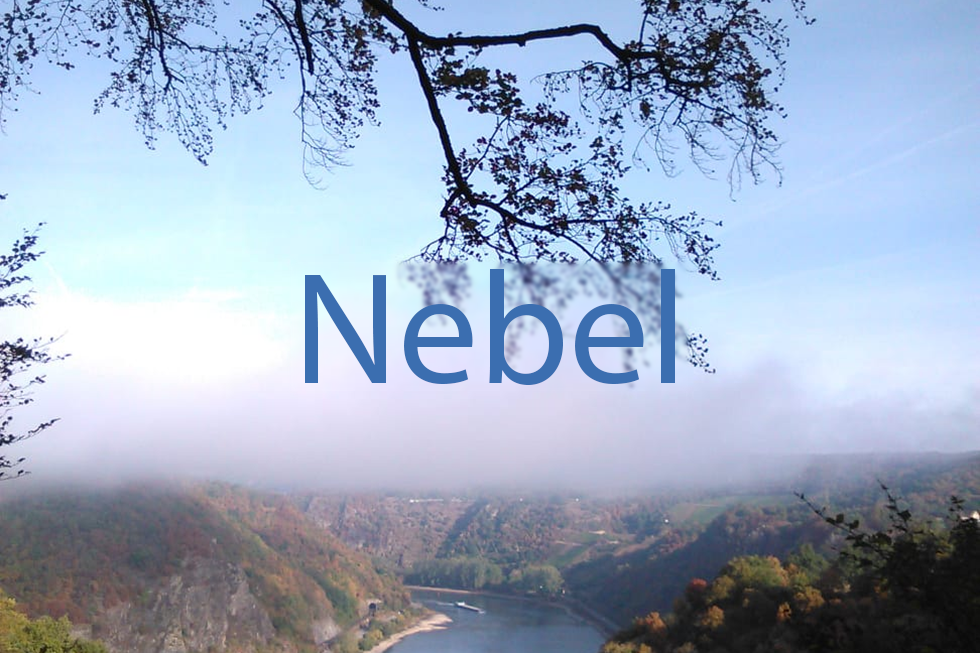
<style>
.page{position:relative;width:980px;height:653px}
.page>*{position:absolute;margin:0}
.t1{font:160px "MyriadPro-Regular";color:#3b6eb0}
</style>
<div class="page">
<p class="t1" style="left:305px;top:269px;width:370px;height:116px">Nebel</p>
</div>
